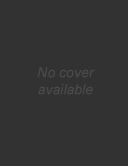
<style>
.page{position:relative;width:128px;height:166px;background:#323232}
.page>*{position:absolute;margin:0}
.t1{font:14px "Arial-ItalicMT";color:#4b4b4b}
</style>
<div class="page">
<p class="t1" style="left:37px;top:67px;width:58px;height:28px;text-align:center">No cover<br>available</p>
</div>
